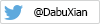
<style>
.page{position:relative;width:100px;height:24px;background:#ffffff}
.page>*{position:absolute;margin:0}
.t1{font:10.7px "Tahoma";color:#000000}
</style>
<div class="page">
<p class="t1" style="left:34px;top:7px;width:54px;height:10px">@DabuXian</p>
</div>
